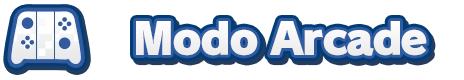
<style>
.page{position:relative;width:464px;height:80px;background:#ffffff}
.page>*{position:absolute;margin:0}
.t1{font:44px "RodinPro-UB";letter-spacing:-0.044em;color:#f4f3f4}
</style>
<div class="page">
<p class="t1" style="left:136px;top:21px;width:291px;height:35px">Modo Arcade</p>
</div>
